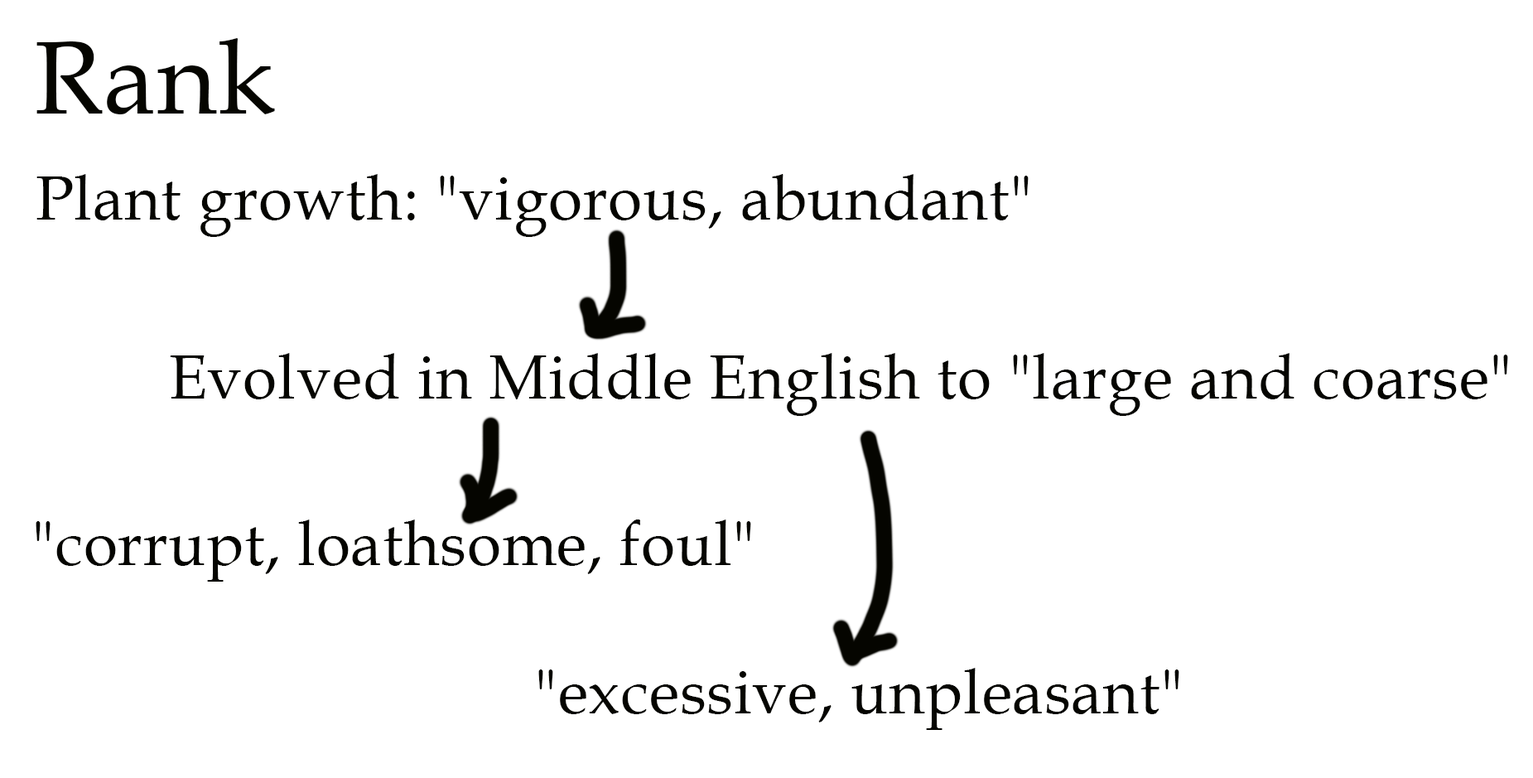
<style>
.page{position:relative;width:1533px;height:778px;background:#ffffff}
.page>*{position:absolute;margin:0}
.t1{font:103.5px "BookAntiqua";letter-spacing:0.01em;color:#050500}
.t2{font:62.1px "BookAntiqua";letter-spacing:0.01em;color:#050500}
</style>
<div class="page">
<p class="t1" style="left:36px;top:38px;width:239px;height:76px">Rank</p>
<p class="t2" style="left:36px;top:174px;width:993px;height:63px">Plant growth: "vigorous, abundant"</p>
<p class="t2" style="left:170px;top:353px;width:1338px;height:63px">Evolved in Middle English to "large and coarse"</p>
<p class="t2" style="left:36px;top:519px;width:715px;height:62px">"corrupt, loathsome, foul"</p>
<p class="t2" style="left:538px;top:668px;width:641px;height:62px">"excessive, unpleasant"</p>
</div>
